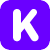
<style>
.page{position:relative;width:50px;height:50px;background:#6a00ff}
.page>*{position:absolute;margin:0}
.t1{font:42px "Jellee-Roman";color:#ffffff}
</style>
<div class="page">
<p class="t1" style="left:12px;top:8px;width:27px;height:34px">K</p>
</div>
